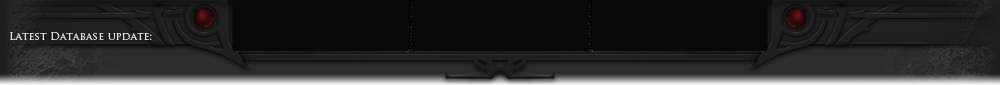
<style>
.page{position:relative;width:1000px;height:85px;background:#080808}
.page>*{position:absolute;margin:0}
.t1{font:10.7px "TrajanPro-Regular";color:#e4e4e4}
</style>
<div class="page">
<p class="t1" style="left:10px;top:32px;width:142px;height:8px">Latest Database update:</p>
</div>
